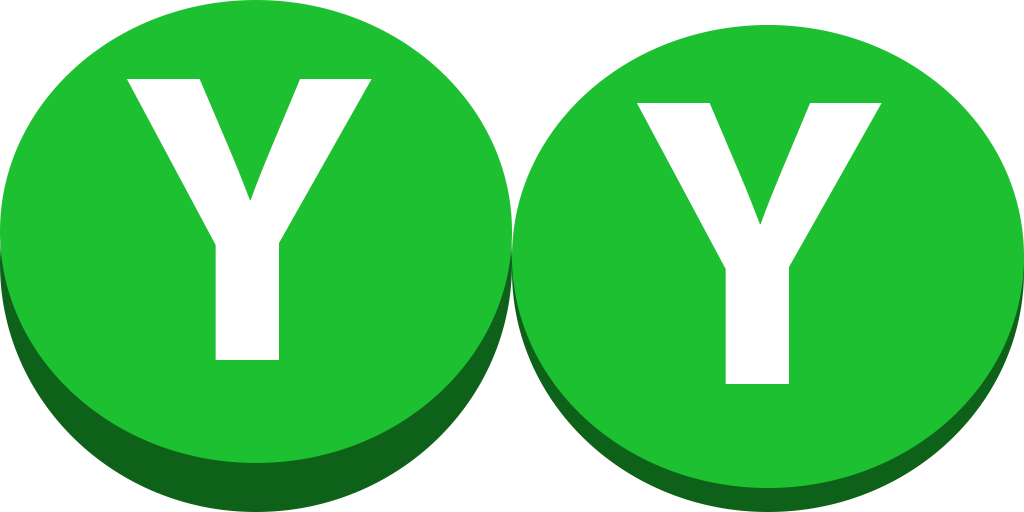
<style>
.page{position:relative;width:1024px;height:512px;background:#1dc030}
.page>*{position:absolute;margin:0}
.t1{font:416.7px "MyriadPro-Bold";color:#ffffff}
</style>
<div class="page">
<p class="t1" style="left:127px;top:79px;width:245px;height:281px">Y</p>
<p class="t1" style="left:637px;top:103px;width:245px;height:281px">Y</p>
</div>
